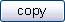
<style>
.page{position:relative;width:65px;height:22px}
.page>*{position:absolute;margin:0}
.t1{font:12.6px "ArialMT";color:#000000;scale:1.1 1}
</style>
<div class="page">
<p class="t1" style="left:18px;top:8px;width:28px;height:10px">copy</p>
</div>
